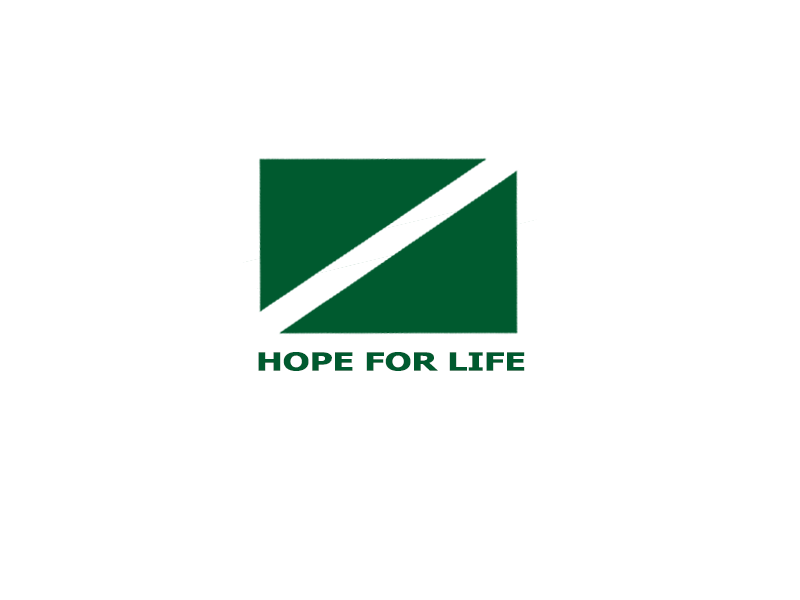
<style>
.page{position:relative;width:800px;height:600px;background:#ffffff}
.page>*{position:absolute;margin:0}
.t1{font:25px "Tahoma-Bold";color:#005a2f;scale:1.4 1}
</style>
<div class="page">
<p class="t1" style="left:258px;top:352px;width:267px;height:19px">HOPE FOR LIFE</p>
</div>
